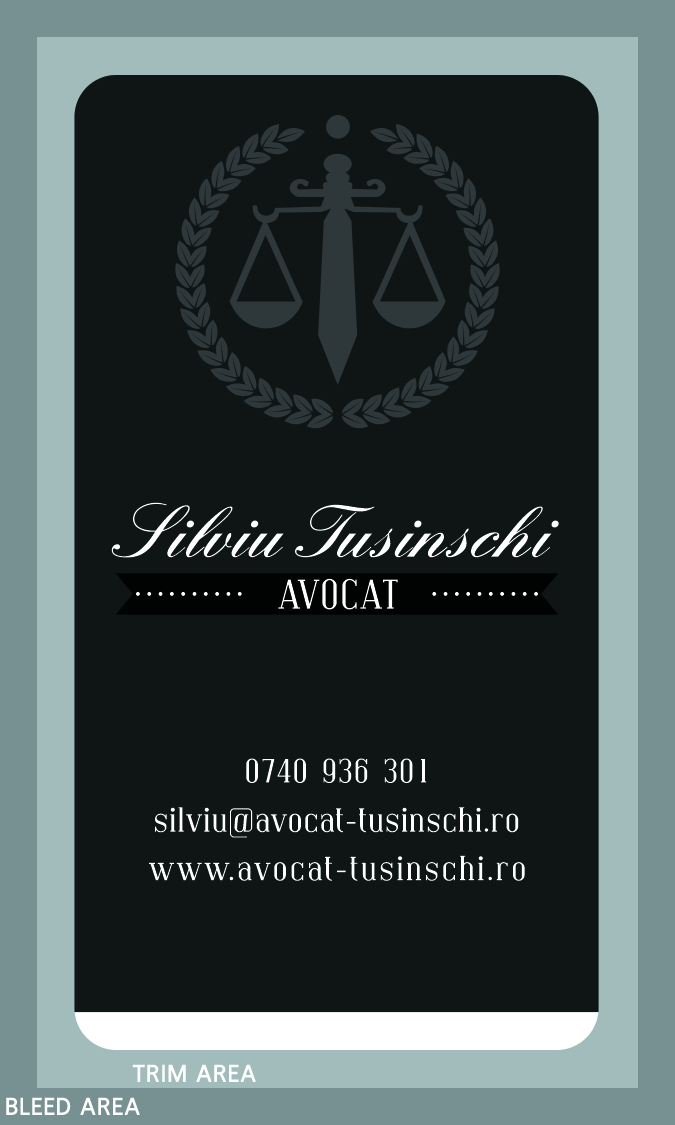
<style>
.page{position:relative;width:675px;height:1125px;background:#0f1415}
.page>*{position:absolute;margin:0}
.t1{font:75px "EnglandHandDB";color:#ffffff}
.t2{font:41.7px "Covington";color:#ffffff}
.t3{font:33.5px "Covington";color:#ffffff}
.t4{font:33.5px "Covington";letter-spacing:0.04em;color:#ffffff}
.t5{font:25px "FranKleinBold";color:#ffffff}
</style>
<div class="page">
<p class="t1" style="left:111px;top:502px;width:448px;height:56px">Silviu Tusinschi</p>
<p class="t2" style="left:278px;top:578px;width:120px;height:32px">AVOCAT</p>
<p class="t3" style="left:246px;top:758px;width:181px;height:25px">0740 936 301</p>
<p class="t3" style="left:155px;top:807px;width:364px;height:31px">silviu@avocat-tusinschi.ro</p>
<p class="t4" style="left:149px;top:855px;width:376px;height:26px">www.avocat-tusinschi.ro</p>
<p class="t5" style="left:132px;top:1064px;width:124px;height:18px">TRIM AREA</p>
<p class="t5" style="left:6px;top:1097px;width:134px;height:18px">BLEED AREA</p>
</div>
